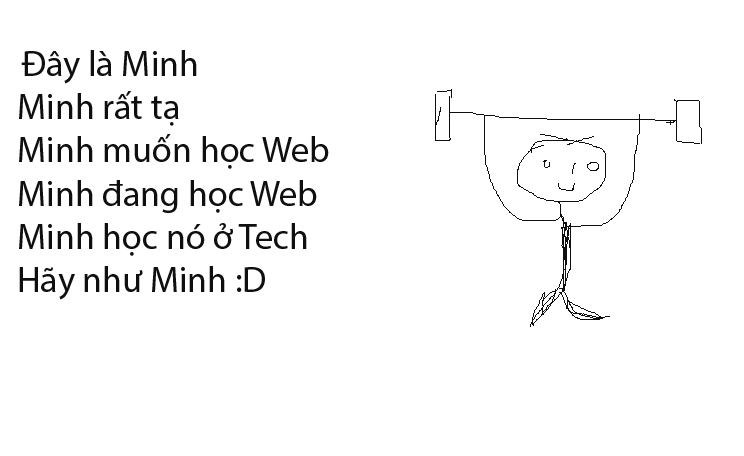
<style>
.page{position:relative;width:744px;height:456px;background:#ffffff}
.page>*{position:absolute;margin:0}
.t1{font:36px "MyriadPro-Regular";color:#0f0f0f}
.t2{font:12px "MyriadPro-Regular";color:#0f0f0f}
</style>
<div class="page">
<p class="t1" style="left:19px;top:50px;width:310px;height:250px"><span class="t2">  </span>Đây là Minh<br>Minh rất tạ<br>Minh muốn học Web<br>Minh đang học Web<br>Minh học nó ở Tech <br>Hãy như Minh :D</p>
</div>
